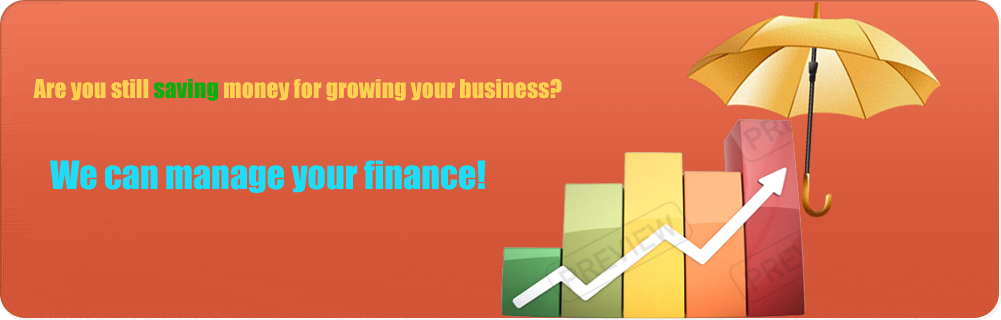
<style>
.page{position:relative;width:1001px;height:320px}
.page>*{position:absolute;margin:0}
.t1{font:24px "Impact";color:#fdd250}
.t2{font:24px "Impact";color:#0aae0d}
.t3{font:36px "Impact";color:#1bddf9}
</style>
<div class="page">
<p class="t1" style="left:33px;top:78px;width:529px;height:23px">Are you still <span class="t2">saving</span> money for growing your business?</p>
<p class="t3" style="left:50px;top:160px;width:436px;height:33px">We can manage your finance!</p>
</div>
